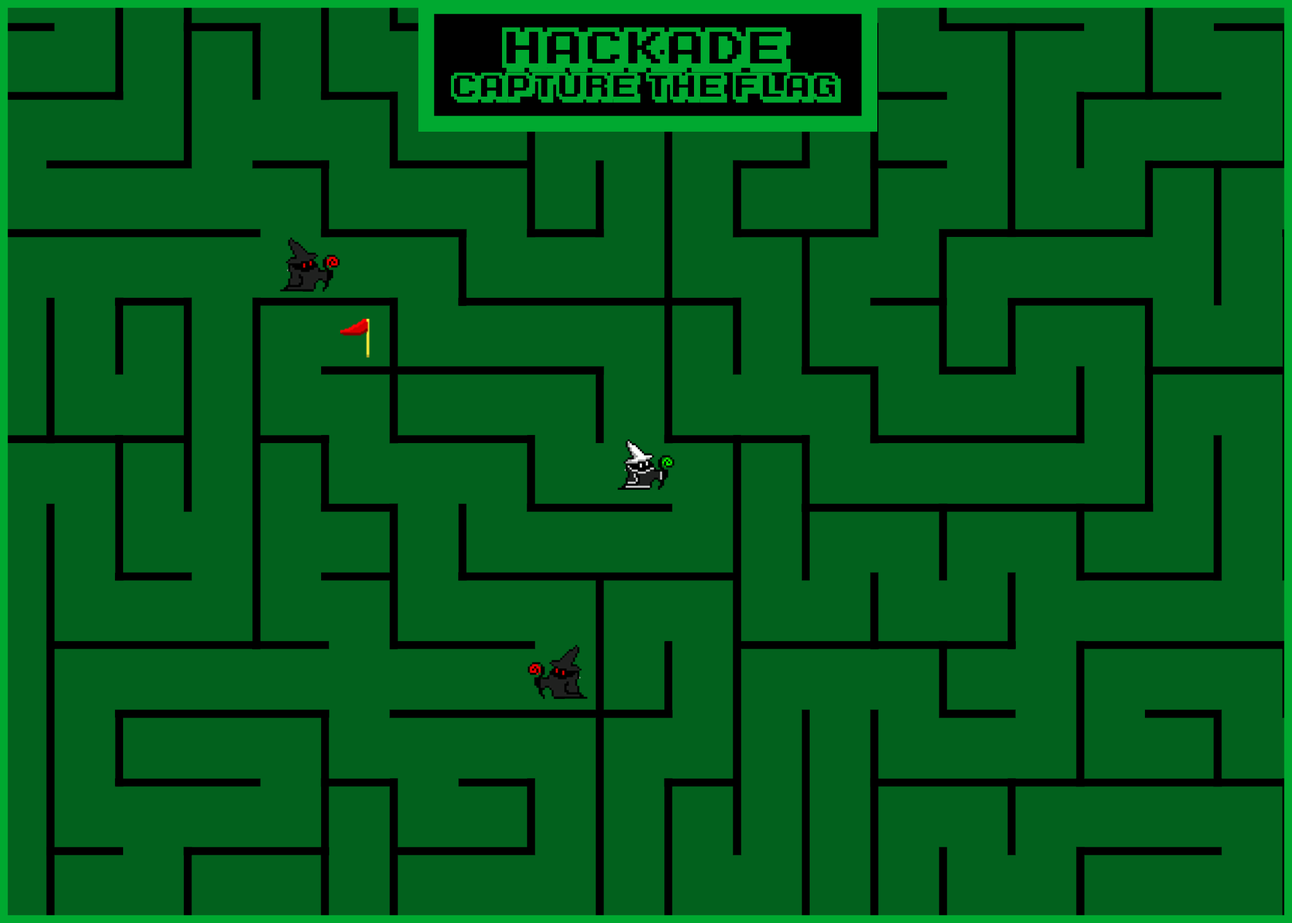
<style>
.page{position:relative;width:1292px;height:923px;background:#02611d}
.page>*{position:absolute;margin:0}
.t1{font:46.1px "KarmaticArcade";color:#00a930}
.t2{font:30.8px "KarmaticArcade";color:#00a930}
</style>
<div class="page">
<p class="t1" style="left:502px;top:27px;width:289px;height:46px">HACKade</p>
<p class="t2" style="left:451px;top:73px;width:390px;height:30px">Capture the Flag</p>
</div>
